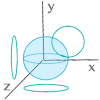
<style>
.page{position:relative;width:100px;height:100px;background:#ffffff}
.page>*{position:absolute;margin:0}
.t1{font:12px "OriyaMN";color:#707070}
</style>
<div class="page">
<p class="t1" style="left:47px;top:3px;width:8px;height:11px">y</p>
<p class="t1" style="left:88px;top:64px;width:7px;height:8px">x</p>
<p class="t1" style="left:3px;top:83px;width:8px;height:8px">z</p>
</div>
